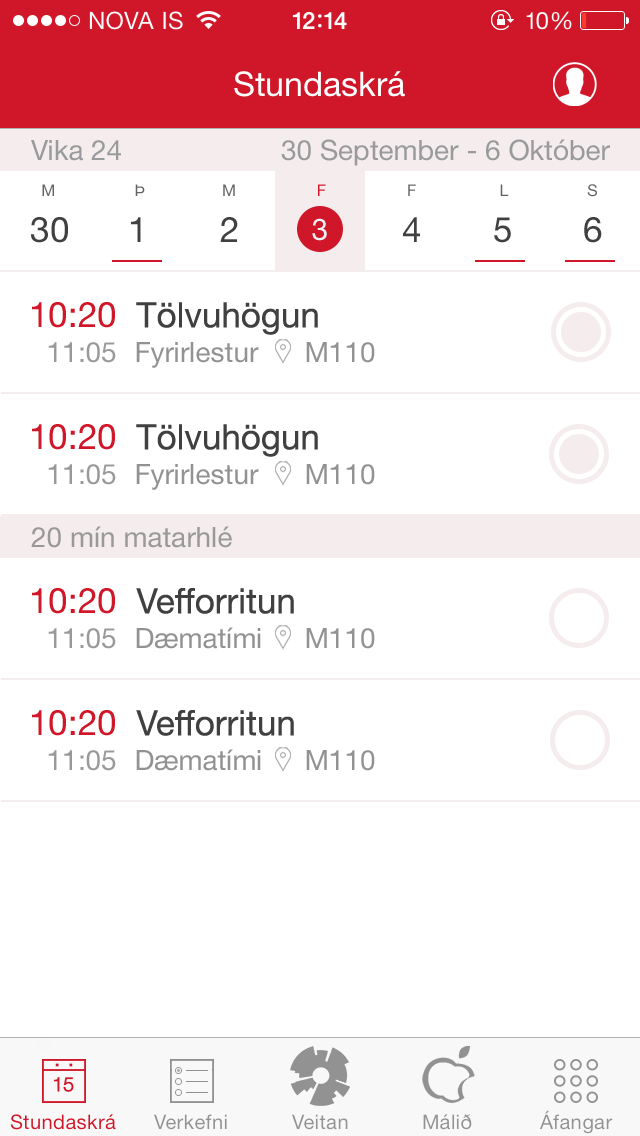
<style>
.page{position:relative;width:640px;height:1136px;background:#ffffff}
.page>*{position:absolute;margin:0}
.t1{font:28px "HelveticaNeue";color:#999a9c}
.t2{font:16px "HelveticaNeue";color:#636466}
.t3{font:16px "HelveticaNeue";color:#d01729}
.t4{font:35px "HelveticaNeue";color:#404041}
.t5{font:30px "HelveticaNeue";color:#ecf1f4}
.t6{font:35px "HelveticaNeue";color:#d01729}
.t7{font:28px "HelveticaNeue";color:#99999a}
.t8{font:28px "HelveticaNeue";color:#929293}
</style>
<div class="page">
<p class="t1" style="left:31px;top:140px;width:90px;height:21px">Vika 24</p>
<p class="t1" style="left:281px;top:139px;width:329px;height:27px">30 September - 6 Október</p>
<p class="t2" style="left:42px;top:184px;width:12px;height:12px">M</p>
<p class="t2" style="left:135px;top:184px;width:10px;height:12px">Þ</p>
<p class="t2" style="left:223px;top:184px;width:12px;height:12px">M</p>
<p class="t3" style="left:318px;top:184px;width:8px;height:12px">F</p>
<p class="t2" style="left:408px;top:184px;width:8px;height:12px">F</p>
<p class="t2" style="left:500px;top:184px;width:9px;height:12px">L</p>
<p class="t2" style="left:587px;top:184px;width:10px;height:13px">S</p>
<p class="t4" style="left:31px;top:217px;width:37px;height:26px">30</p>
<p class="t4" style="left:131px;top:217px;width:10px;height:25px">1</p>
<p class="t4" style="left:220px;top:217px;width:18px;height:25px">2</p>
<p class="t5" style="left:312px;top:218px;width:15px;height:23px">3</p>
<p class="t4" style="left:403px;top:217px;width:17px;height:25px">4</p>
<p class="t4" style="left:494px;top:217px;width:17px;height:26px">5</p>
<p class="t4" style="left:584px;top:217px;width:18px;height:26px">6</p>
<p class="t6" style="left:32px;top:302px;width:83px;height:26px">10:20</p>
<p class="t4" style="left:136px;top:302px;width:182px;height:33px">Tölvuhögun</p>
<p class="t7" style="left:48px;top:342px;width:68px;height:21px">11:05</p>
<p class="t8" style="left:136px;top:342px;width:123px;height:26px">Fyrirlestur</p>
<p class="t8" style="left:306px;top:342px;width:69px;height:21px">M110</p>
<p class="t6" style="left:32px;top:424px;width:83px;height:26px">10:20</p>
<p class="t4" style="left:136px;top:424px;width:182px;height:33px">Tölvuhögun</p>
<p class="t7" style="left:48px;top:464px;width:68px;height:21px">11:05</p>
<p class="t8" style="left:136px;top:464px;width:123px;height:26px">Fyrirlestur</p>
<p class="t8" style="left:306px;top:464px;width:69px;height:21px">M110</p>
<p class="t7" style="left:31px;top:526px;width:201px;height:22px">20 mín matarhlé</p>
<p class="t6" style="left:32px;top:588px;width:83px;height:26px">10:20</p>
<p class="t4" style="left:136px;top:588px;width:158px;height:26px">Vefforritun</p>
<p class="t7" style="left:48px;top:628px;width:68px;height:21px">11:05</p>
<p class="t8" style="left:136px;top:627px;width:125px;height:22px">Dæmatími</p>
<p class="t8" style="left:306px;top:628px;width:69px;height:21px">M110</p>
<p class="t6" style="left:32px;top:710px;width:83px;height:26px">10:20</p>
<p class="t4" style="left:136px;top:710px;width:158px;height:26px">Vefforritun</p>
<p class="t7" style="left:48px;top:750px;width:68px;height:21px">11:05</p>
<p class="t8" style="left:136px;top:749px;width:125px;height:22px">Dæmatími</p>
<p class="t8" style="left:306px;top:750px;width:69px;height:21px">M110</p>
</div>
